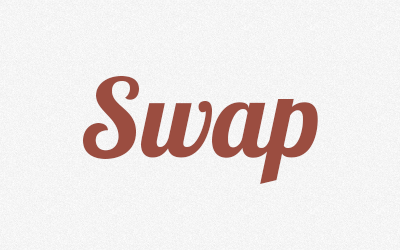
<style>
.page{position:relative;width:400px;height:250px}
.page>*{position:absolute;margin:0}
.t1{font:108px "Lobster1.4";color:#9b4d40}
</style>
<div class="page">
<p class="t1" style="left:83px;top:76px;width:235px;height:108px">Swap</p>
</div>
